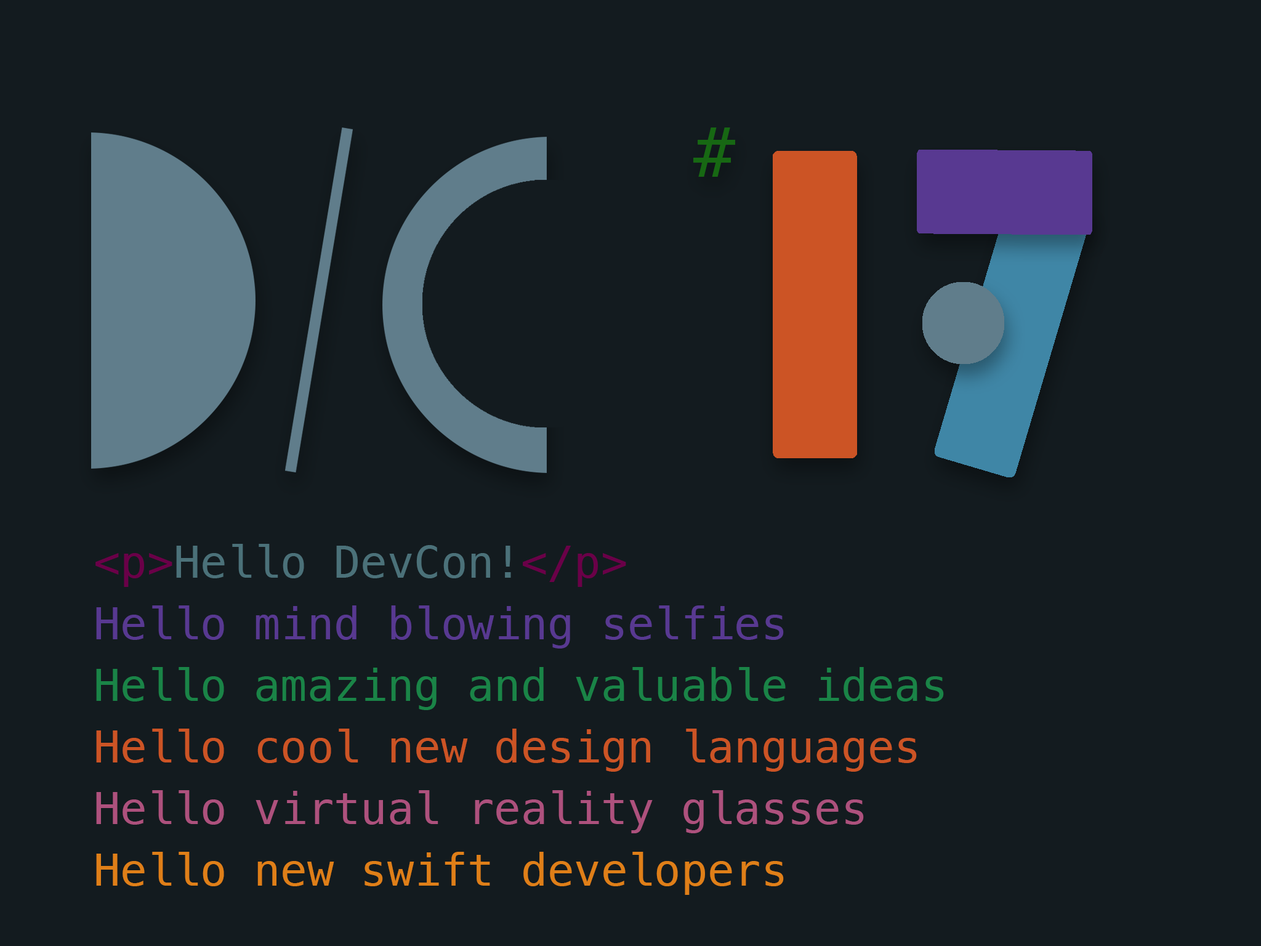
<style>
.page{position:relative;width:1261px;height:946px;background:#131b1f}
.page>*{position:absolute;margin:0}
.t1{font:69px "Menlo-Regular";color:#176813}
.t2{font:44.3px/61.6px "Menlo-Regular";color:#1a8447}
.t3{font:44.3px/61.6px "Menlo-Regular";color:#6a0048}
.t4{font:44.3px/61.6px "Menlo-Regular";color:#4b7179}
.t5{font:44.3px/61.6px "Menlo-Regular";color:#583991}
.t6{font:44.3px/61.6px "Menlo-Regular";color:#cc5425}
.t7{font:44.3px/61.6px "Menlo-Regular";color:#ad517d}
.t8{font:44.3px/61.6px "Menlo-Regular";color:#df7f18}
</style>
<div class="page">
<p class="t1" style="left:693px;top:127px;width:42px;height:50px">#</p>
<p class="t2" style="left:95px;top:544px;width:849px;height:351px"><span class="t3">&lt;p&gt;</span><span class="t4">Hello DevCon!</span><span class="t3">&lt;/p&gt;<br></span><span class="t5">Hello mind blowing selfies<br></span>Hello amazing and valuable ideas<br><span class="t6">Hello cool new design languages<br></span><span class="t7">Hello virtual reality glasses<br></span><span class="t8">Hello new swift developers</span></p>
</div>
